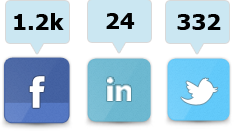
<style>
.page{position:relative;width:234px;height:131px;background:#ffffff}
.page>*{position:absolute;margin:0}
.t1{font:22.1px "Tahoma-Bold";color:#000000;scale:1.06 1}
</style>
<div class="page">
<p class="t1" style="left:14px;top:13px;width:50px;height:17px">1.2k</p>
<p class="t1" style="left:106px;top:13px;width:29px;height:16px">24</p>
<p class="t1" style="left:177px;top:14px;width:44px;height:16px">332</p>
</div>
